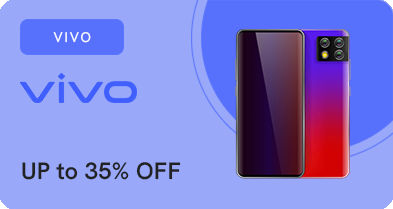
<style>
.page{position:relative;width:393px;height:209px;background:#99a8f9}
.page>*{position:absolute;margin:0}
.t1{font:13.9px "HankenGrotesk-Regular";letter-spacing:0.14em;color:#ffffff}
.t2{font:23.6px "HankenGrotesk-SemiBold";letter-spacing:0.01em;color:#222222}
</style>
<div class="page">
<p class="t1" style="left:53px;top:32px;width:38px;height:11px">VIVO</p>
<p class="t2" style="left:22px;top:162px;width:159px;height:18px">UP to 35% OFF</p>
</div>
